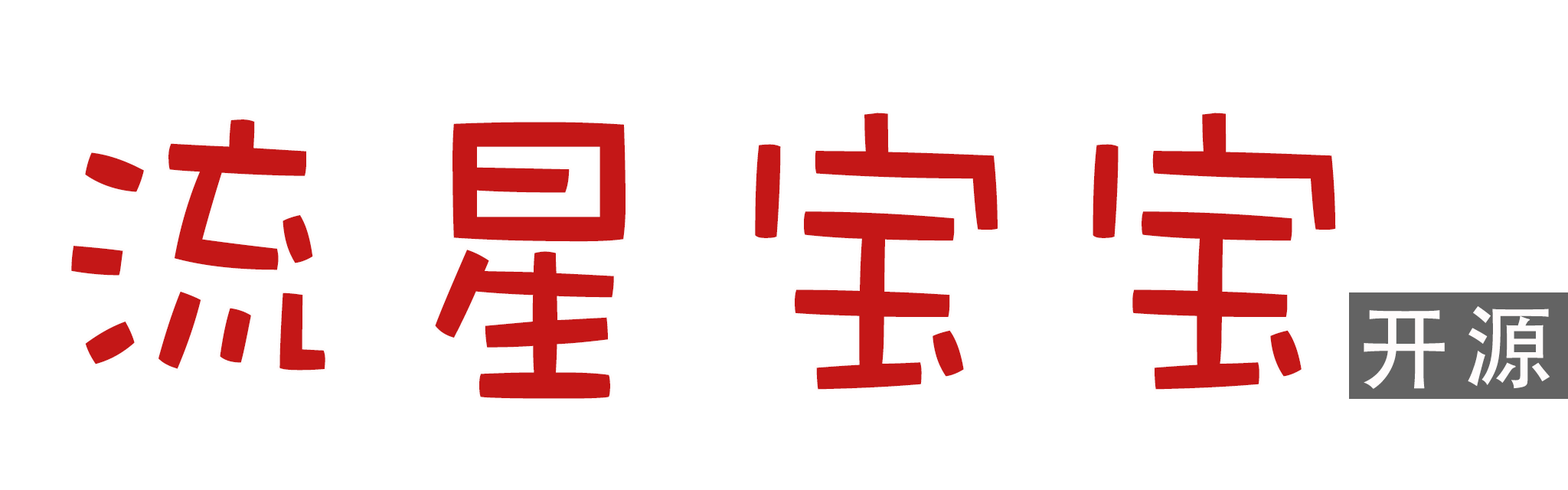
<style>
.page{position:relative;width:1568px;height:490px;background:#ffffff}
.page>*{position:absolute;margin:0}
.t1{font:360.8px "DFWaWaSC-W5";letter-spacing:0.075em;color:#c41717;scale:0.87 1}
.t2{font:91.9px "AdobeHeitiStd-Regular";letter-spacing:0.15em;color:#fffcfc}
</style>
<div class="page">
<p class="t1" style="left:71px;top:113px;width:1265px;height:286px">流星宝宝</p>
<p class="t2" style="left:1364px;top:306px;width:186px;height:83px">开源</p>
</div>
